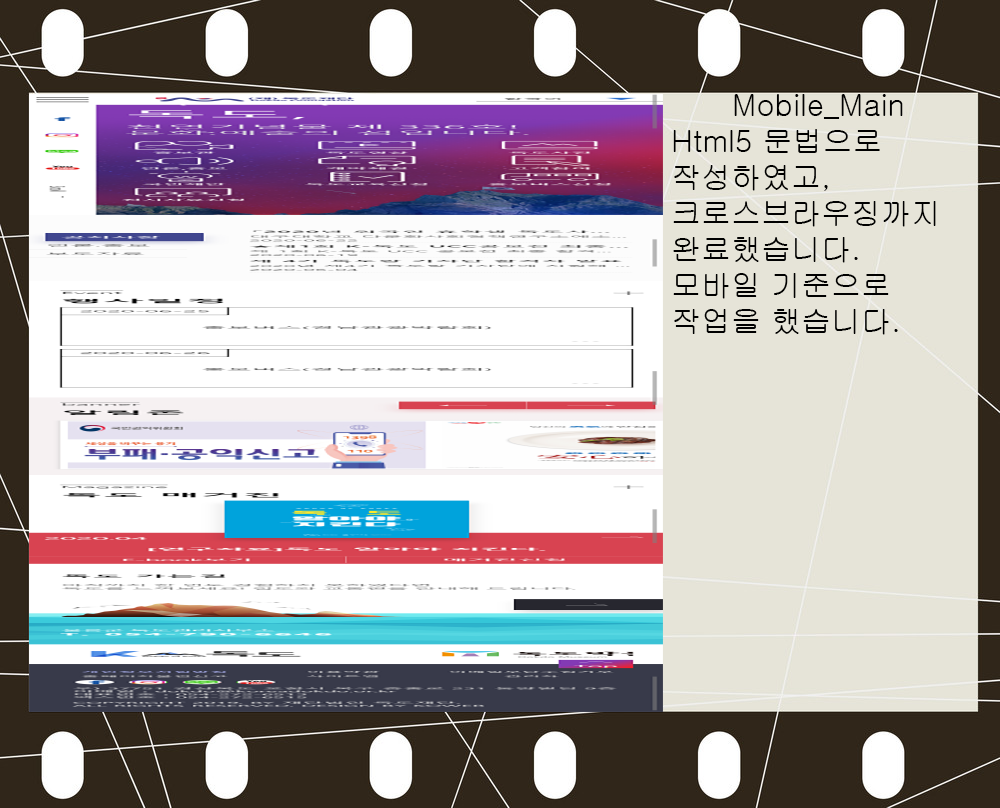
<style>
.page{position:relative;width:1000px;height:808px}
.page>*{position:absolute;margin:0}
.t1{font:30px "Gulim";color:#000000}
</style>
<div class="page">
<p class="t1" style="left:673px;top:94px;width:263px;height:241px;text-align:center">Mobile_Main<br> Html5 문법으로                  <br> 작성하였고,<br> 크로스브라우징까지 <br> 완료했습니다.<br> 모바일 기준으로<br> 작업을 했습니다.</p>
</div>
